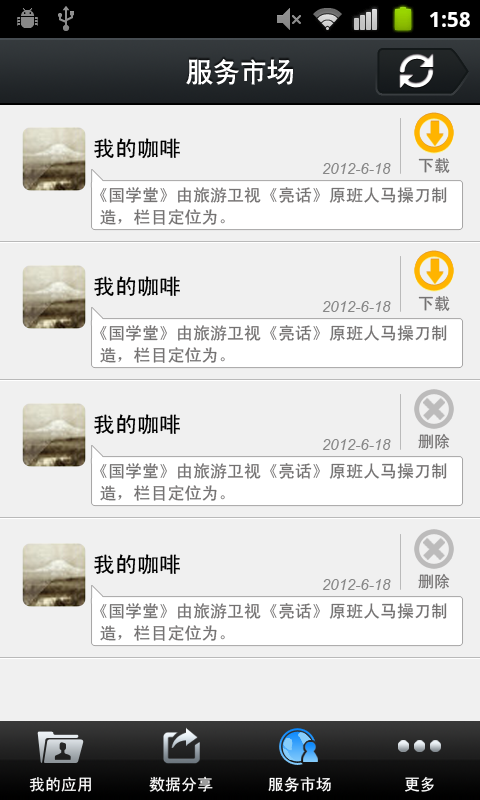
<style>
.page{position:relative;width:480px;height:800px;background:#f0f0f0}
.page>*{position:absolute;margin:0}
.t1{font:27px "CTCuHeiSJ";color:#ffffff}
.t2{font:22px "SimHei";color:#000000}
.t3{font:16px "SimHei";color:#747272}
.t4{font:15px "Arial-ItalicMT";color:#878787}
.t5{font:17px/22px "SimHei";color:#747272}
.t6{font:16px "SimHei";color:#ffffff}
</style>
<div class="page">
<p class="t1" style="left:186px;top:58px;width:107px;height:27px">服务市场</p>
<p class="t2" style="left:94px;top:138px;width:86px;height:21px">我的咖啡</p>
<p class="t3" style="left:418px;top:158px;width:32px;height:15px">下载</p>
<p class="t4" style="left:322px;top:163px;width:69px;height:11px">2012-6-18</p>
<p class="t5" style="left:100px;top:187px;width:347px;height:38px">《国学堂》由旅游卫视《亮话》原班人马操刀制<br> 造，栏目定位为。</p>
<p class="t2" style="left:94px;top:276px;width:86px;height:21px">我的咖啡</p>
<p class="t4" style="left:322px;top:301px;width:69px;height:11px">2012-6-18</p>
<p class="t3" style="left:418px;top:296px;width:32px;height:15px">下载</p>
<p class="t5" style="left:100px;top:325px;width:347px;height:38px">《国学堂》由旅游卫视《亮话》原班人马操刀制<br> 造，栏目定位为。</p>
<p class="t2" style="left:94px;top:414px;width:86px;height:21px">我的咖啡</p>
<p class="t3" style="left:418px;top:433px;width:32px;height:16px">删除</p>
<p class="t4" style="left:322px;top:439px;width:69px;height:11px">2012-6-18</p>
<p class="t5" style="left:100px;top:463px;width:347px;height:38px">《国学堂》由旅游卫视《亮话》原班人马操刀制<br> 造，栏目定位为。</p>
<p class="t2" style="left:94px;top:554px;width:86px;height:21px">我的咖啡</p>
<p class="t4" style="left:322px;top:579px;width:69px;height:11px">2012-6-18</p>
<p class="t3" style="left:418px;top:573px;width:32px;height:16px">删除</p>
<p class="t5" style="left:100px;top:603px;width:347px;height:38px">《国学堂》由旅游卫视《亮话》原班人马操刀制<br> 造，栏目定位为。</p>
<p class="t6" style="left:29px;top:777px;width:62px;height:15px">我的应用</p>
<p class="t6" style="left:149px;top:776px;width:64px;height:16px">数据分享</p>
<p class="t6" style="left:268px;top:776px;width:63px;height:16px">服务市场</p>
<p class="t6" style="left:405px;top:776px;width:29px;height:16px">更多</p>
</div>
